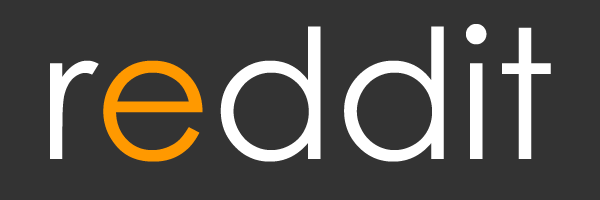
<style>
.page{position:relative;width:600px;height:200px;background:#333333}
.page>*{position:absolute;margin:0}
.t1{font:180px "CenturyGothic";color:#ffffff}
.t2{font:180px "CenturyGothic";color:#ff9900}
</style>
<div class="page">
<p class="t1" style="left:50px;top:24px;width:501px;height:138px">r<span class="t2">e</span>ddit</p>
</div>
